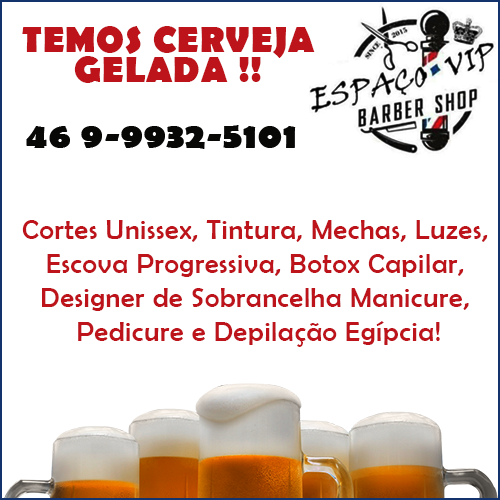
<style>
.page{position:relative;width:500px;height:500px;background:#ffffff}
.page>*{position:absolute;margin:0}
.t1{font:36px/29.3px "BerlinSansFB-Bold";letter-spacing:0.025em;color:#bd131b}
.t2{font:36px "BerlinSansFB-Bold";letter-spacing:0.025em;color:#11100d}
.t3{font:28px/34px "BerlinSansFB-Reg";letter-spacing:0.025em;color:#bd131b}
</style>
<div class="page">
<p class="t1" style="left:22px;top:26px;width:293px;height:57px;text-align:center">TEMOS CERVEJA<br>GELADA !!</p>
<p class="t2" style="left:26px;top:125px;width:270px;height:24px">46 9-9932-5101</p>
<p class="t3" style="left:22px;top:220px;width:466px;height:127px;text-align:center">Cortes Unissex, Tintura, Mechas, Luzes, <br>Escova Progressiva, Botox Capilar, <br>Designer de Sobrancelha Manicure, <br>Pedicure e Depilação Egípcia!</p>
</div>
